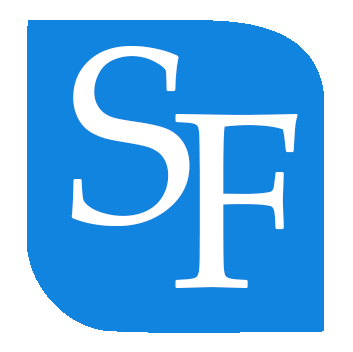
<style>
.page{position:relative;width:353px;height:352px;background:#1084de}
.page>*{position:absolute;margin:0}
.t1{font:250px "PalatinoLinotype-Roman";letter-spacing:0.02em;color:#ffffff}
</style>
<div class="page">
<p class="t1" style="left:71px;top:46px;width:119px;height:180px">S</p>
<p class="t1" style="left:175px;top:114px;width:123px;height:174px">F</p>
</div>
